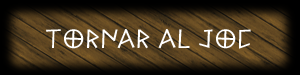
<style>
.page{position:relative;width:300px;height:75px}
.page>*{position:absolute;margin:0}
.t1{font:28px "Alfabetix";color:#ffffff}
</style>
<div class="page">
<p class="t1" style="left:46px;top:29px;width:205px;height:20px">TOrNAr Al JOc</p>
</div>
